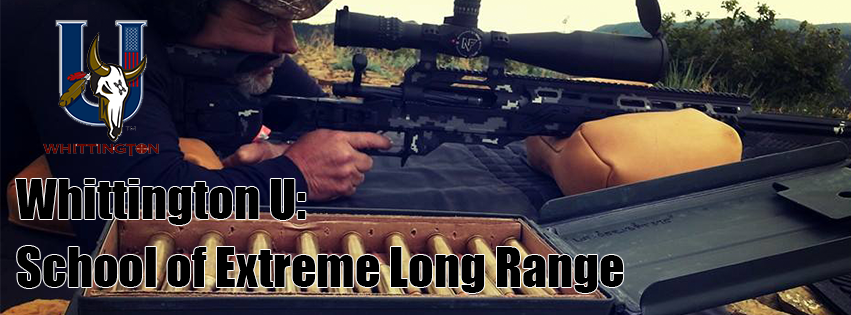
<style>
.page{position:relative;width:851px;height:315px}
.page>*{position:absolute;margin:0}
.t1{font:50px "Impact";color:#000000}
</style>
<div class="page">
<p class="t1" style="left:15px;top:179px;width:291px;height:46px">Whittington U:</p>
<p class="t1" style="left:17px;top:246px;width:607px;height:47px">School of Extreme Long Range</p>
</div>
